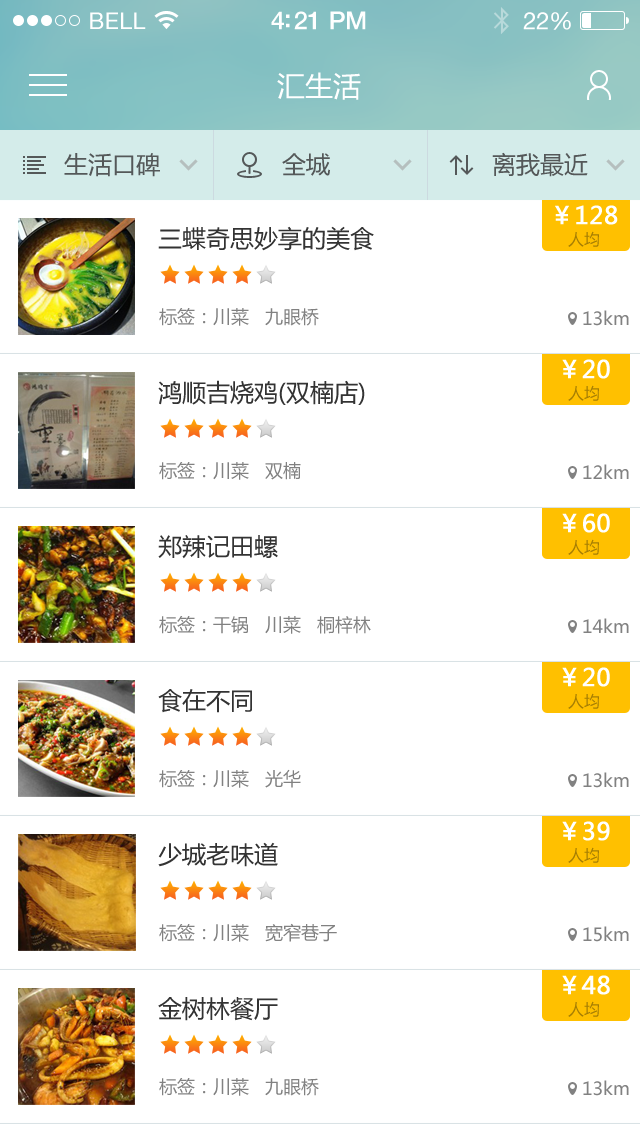
<style>
.page{position:relative;width:640px;height:1136px;background:#ffffff}
.page>*{position:absolute;margin:0}
.t1{font:23px "HelveticaNeue";letter-spacing:0.02em;color:#ffffff}
.t2{font:25px "HelveticaNeue-Medium";letter-spacing:-0.02em;color:#ffffff}
.t3{font:24px "HelveticaNeue";letter-spacing:-0.02em;color:#ffffff}
.t4{font:28px "MicrosoftYaHei";color:#ffffff}
.t5{font:24px "MicrosoftYaHei";color:#545859}
.t6{font:24px/21px "MicrosoftYaHei";color:#ffffff;font-weight:bold}
.t7{font:16px/21px "MicrosoftYaHei";color:#a67e03}
.t8{font:24px "MicrosoftYaHei";color:#333333}
.t9{font:18px "MicrosoftYaHei";color:#818181}
</style>
<div class="page">
<p class="t1" style="left:90px;top:12px;width:56px;height:17px">BELL</p>
<p class="t2" style="left:271px;top:11px;width:95px;height:19px">4:21 PM</p>
<p class="t3" style="left:523px;top:12px;width:48px;height:18px">22%</p>
<p class="t4" style="left:277px;top:72px;width:84px;height:28px">汇生活</p>
<p class="t5" style="left:64px;top:153px;width:96px;height:24px">生活口碑</p>
<p class="t5" style="left:282px;top:153px;width:48px;height:23px">全城</p>
<p class="t5" style="left:492px;top:152px;width:96px;height:25px">离我最近</p>
<p class="t6" style="left:555px;top:205px;width:63px;height:42px;text-align:center">￥128<br><span class="t7">人均</span></p>
<p class="t8" style="left:158px;top:226px;width:216px;height:25px">三蝶奇思妙享的美食</p>
<p class="t9" style="left:159px;top:308px;width:160px;height:18px">标签：川菜   九眼桥</p>
<p class="t9" style="left:583px;top:310px;width:46px;height:16px">13km</p>
<p class="t6" style="left:562px;top:359px;width:48px;height:42px;text-align:center">￥20<br><span class="t7">人均</span></p>
<p class="t8" style="left:158px;top:380px;width:207px;height:25px">鸿顺吉烧鸡(双楠店)</p>
<p class="t9" style="left:159px;top:462px;width:142px;height:18px">标签：川菜   双楠</p>
<p class="t9" style="left:583px;top:464px;width:46px;height:15px">12km</p>
<p class="t6" style="left:562px;top:513px;width:48px;height:42px;text-align:center">￥60<br><span class="t7">人均</span></p>
<p class="t8" style="left:158px;top:535px;width:120px;height:24px">郑辣记田螺</p>
<p class="t9" style="left:159px;top:616px;width:212px;height:18px">标签：干锅   川菜   桐梓林</p>
<p class="t9" style="left:583px;top:618px;width:46px;height:15px">14km</p>
<p class="t6" style="left:562px;top:667px;width:48px;height:42px;text-align:center">￥20<br><span class="t7">人均</span></p>
<p class="t8" style="left:158px;top:689px;width:94px;height:24px">食在不同</p>
<p class="t9" style="left:159px;top:769px;width:142px;height:19px">标签：川菜   光华</p>
<p class="t9" style="left:583px;top:772px;width:46px;height:16px">13km</p>
<p class="t6" style="left:562px;top:821px;width:48px;height:42px;text-align:center">￥39<br><span class="t7">人均</span></p>
<p class="t8" style="left:158px;top:842px;width:120px;height:25px">少城老味道</p>
<p class="t9" style="left:159px;top:923px;width:178px;height:19px">标签：川菜   宽窄巷子</p>
<p class="t9" style="left:583px;top:926px;width:46px;height:16px">15km</p>
<p class="t6" style="left:562px;top:975px;width:48px;height:42px;text-align:center">￥48<br><span class="t7">人均</span></p>
<p class="t8" style="left:158px;top:997px;width:120px;height:24px">金树林餐厅</p>
<p class="t9" style="left:159px;top:1078px;width:160px;height:18px">标签：川菜   九眼桥</p>
<p class="t9" style="left:583px;top:1080px;width:46px;height:16px">13km</p>
</div>
